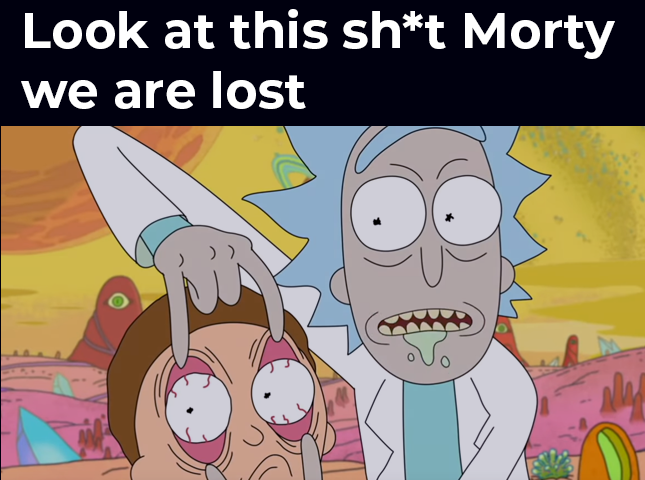
<style>
.page{position:relative;width:645px;height:480px;background:#00000f}
.page>*{position:absolute;margin:0}
.t1{font:50px "Montserrat-Bold";color:#ffffff}
</style>
<div class="page">
<p class="t1" style="left:21px;top:9px;width:594px;height:100px">Look at this sh*t Morty<br>we are lost</p>
</div>
